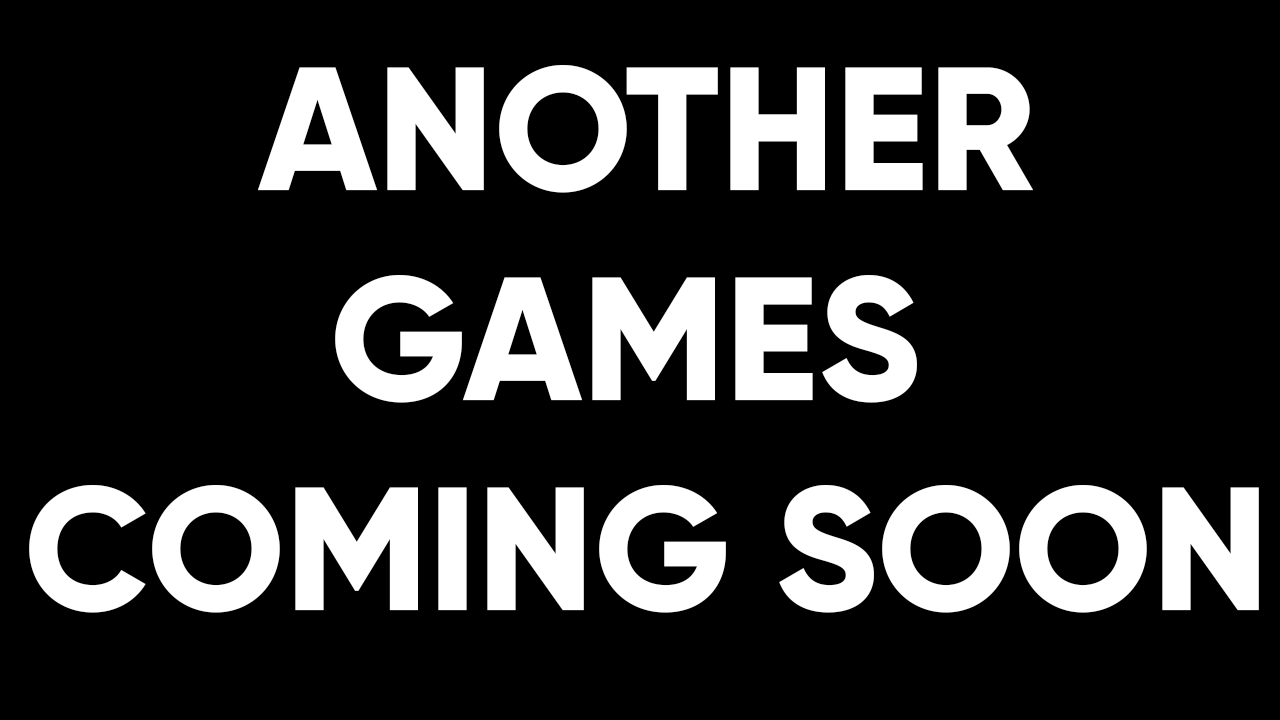
<style>
.page{position:relative;width:1280px;height:720px;background:#000000}
.page>*{position:absolute;margin:0}
.t1{font:175px "Gilroy-ExtraBold";color:#ffffff}
</style>
<div class="page">
<p class="t1" style="left:29px;top:65px;width:1230px;height:548px;text-align:center">ANOTHER<br>GAMES <br>COMING SOON</p>
</div>
